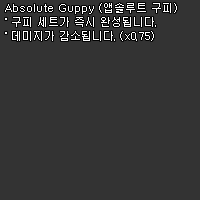
<style>
.page{position:relative;width:200px;height:200px;background:#333333}
.page>*{position:absolute;margin:0}
.t1{font:11px/14px "Dotum";color:#ffffff}
</style>
<div class="page">
<p class="t1" style="left:5px;top:3px;width:172px;height:38px">Absolute Guppy (앱솔루트 구피)<br>˚ 구피 세트가 즉시 완성됩니다.<br>˚ 데미지가 감소됩니다. (x0.75)</p>
</div>
